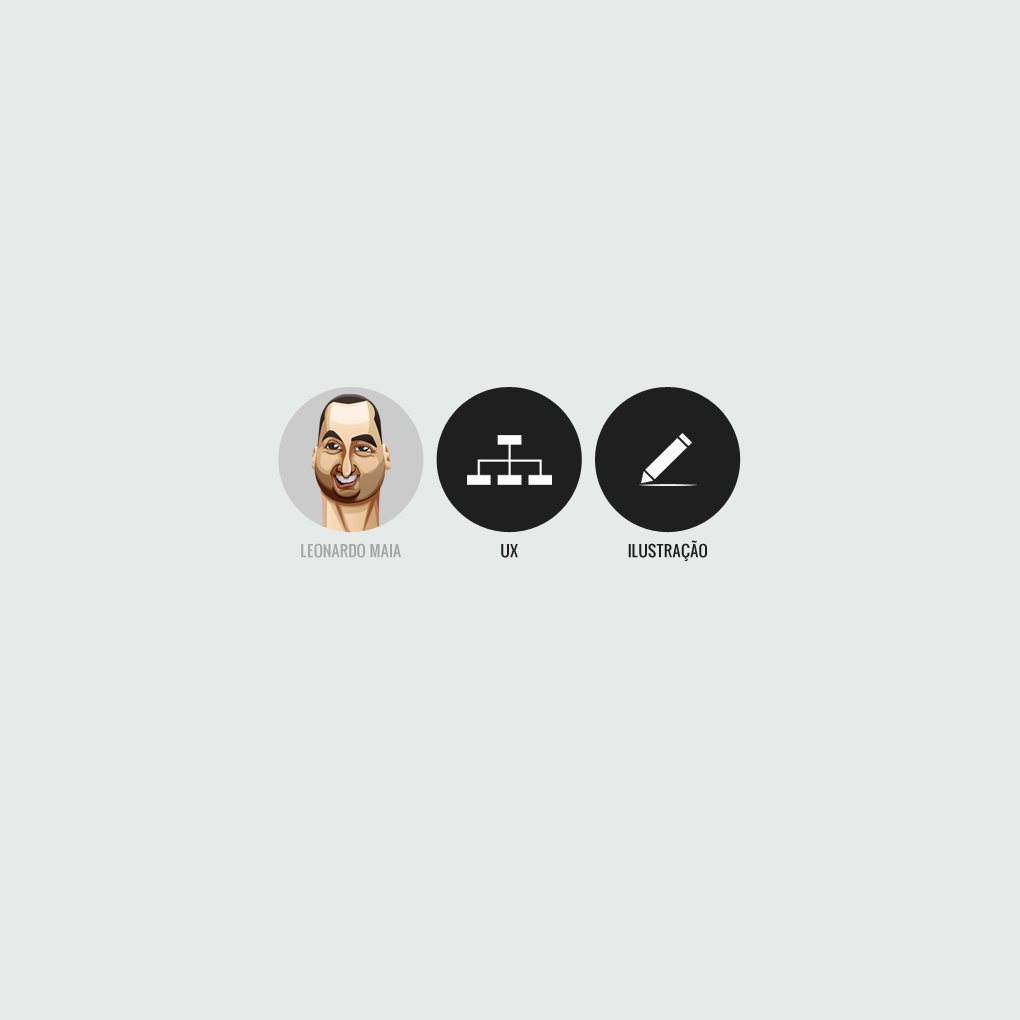
<style>
.page{position:relative;width:1020px;height:1020px;background:#e6ebea}
.page>*{position:absolute;margin:0}
.t1{font:15.2px "Oswald";color:#a5a5a5}
.t2{font:15.2px "Oswald";color:#1f1f1f}
</style>
<div class="page">
<p class="t1" style="left:301px;top:543px;width:100px;height:15px">LEONARDO MAIA</p>
<p class="t2" style="left:501px;top:544px;width:17px;height:14px">UX</p>
<p class="t2" style="left:628px;top:540px;width:79px;height:21px">ILUSTRAÇÃO</p>
</div>
